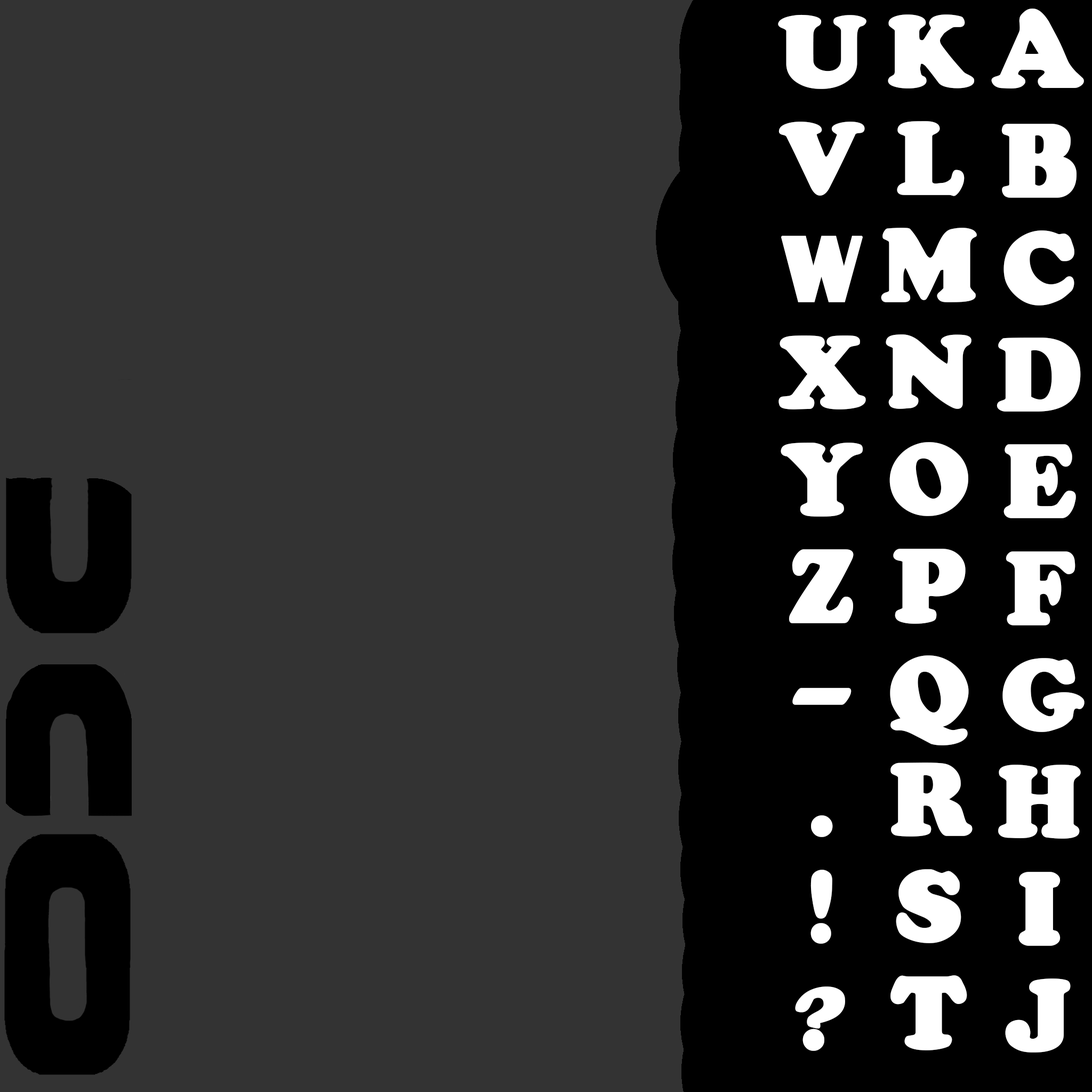
<style>
.page{position:relative;width:1092px;height:1092px;background:#333333}
.page>*{position:absolute;margin:0}
.t1{font:89px "Coolsville";color:#ffffff;font-weight:bold}
.t2{font:89px "Bastion";color:#ffffff;font-weight:bold}
.t3{font:96.2px "Coolsville";color:#ffffff;font-weight:bold}
</style>
<div class="page">
<p class="t1" style="left:778px;top:14px;width:88px;height:1037px;text-align:center">U<br>V<br><span class="t2">W<br></span>X<br>Y<br>Z<br>-<br>.<br>!<br>?</p>
<p class="t1" style="left:881px;top:14px;width:96px;height:1036px;text-align:center">K<br>L<br>M<br>N<br>O<br>P<br>Q<br>R<br>S<br>T</p>
<p class="t3" style="left:991px;top:9px;width:93px;height:80px">A</p>
<p class="t1" style="left:997px;top:124px;width:88px;height:929px;text-align:center">B<br>C<br>D<br>E<br>F<br>G<br>H<br>I<br>J</p>
</div>
